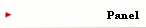
<style>
.page{position:relative;width:146px;height:28px;background:#fefffc}
.page>*{position:absolute;margin:0}
.t1{font:11px "BookmanOldStyle-Bold";color:#000000}
</style>
<div class="page">
<p class="t1" style="left:107px;top:11px;width:32px;height:8px">Panel</p>
</div>
